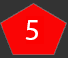
<style>
.page{position:relative;width:68px;height:58px;background:#fa0505}
.page>*{position:absolute;margin:0}
.t1{font:30px "MyriadPro-Regular";color:#ffffff}
</style>
<div class="page">
<p class="t1" style="left:25px;top:20px;width:13px;height:20px">5</p>
</div>
